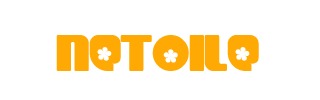
<style>
.page{position:relative;width:320px;height:100px;background:#ffffff}
.page>*{position:absolute;margin:0}
.t1{font:72px "Chick";color:#ffa904}
</style>
<div class="page">
<p class="t1" style="left:56px;top:35px;width:203px;height:36px">NETOILE</p>
</div>
